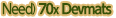
<style>
.page{position:relative;width:116px;height:18px;background:#ffffff}
.page>*{position:absolute;margin:0}
.t1{font:14px "UDShinGoPro-Bold";letter-spacing:-0.08em;color:#375309;scale:0.9 1}
.t2{font:14px "UDShinGoPro-DeBold";letter-spacing:-0.08em;color:#375309;scale:0.9 1}
.t3{font:12px "UDShinGoPro-DeBold";letter-spacing:-0.08em;color:#375309;scale:0.9 1}
.t4{font:12px "UDShinGoPro-Bold";letter-spacing:-0.08em;color:#375309;scale:0.9 1}
</style>
<div class="page">
<p class="t1" style="left:2px;top:2px;width:110px;height:13px"><span class="t2">Need</span><span class="t3">) </span>70<span class="t4">x</span> Devmats</p>
</div>
